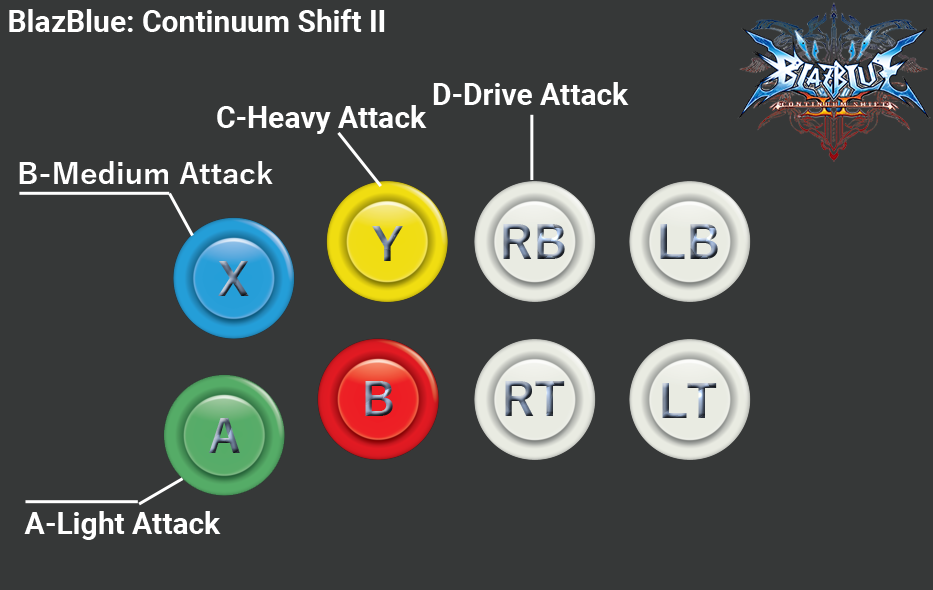
<style>
.page{position:relative;width:933px;height:590px;background:#363838}
.page>*{position:absolute;margin:0}
.t1{font:30px "Roboto-Bold";color:#ffffff}
.t2{font:30px "YuGothic-Bold";color:#ffffff}
</style>
<div class="page">
<p class="t1" style="left:9px;top:9px;width:376px;height:23px">BlazBlue: Continuum Shift II</p>
<p class="t1" style="left:433px;top:82px;width:196px;height:23px">D-Drive Attack</p>
<p class="t1" style="left:217px;top:105px;width:210px;height:29px">C-Heavy Attack</p>
<p class="t2" style="left:19px;top:161px;width:254px;height:23px">B-Medium Attack</p>
<p class="t1" style="left:24px;top:511px;width:197px;height:29px">A-Light Attack</p>
</div>
